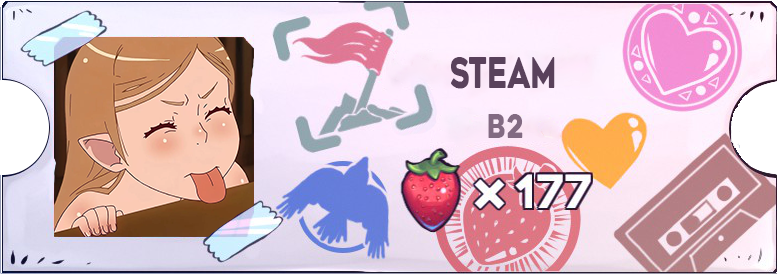
<style>
.page{position:relative;width:778px;height:274px}
.page>*{position:absolute;margin:0}
.t1{font:42px "GeometosSoft-ExtraBold";color:#59415b;scale:0.7 1}
.t2{font:32px "GeometosSoft-ExtraBold";color:#826a82;scale:0.86 1}
</style>
<div class="page">
<p class="t1" style="left:451px;top:57px;width:104px;height:32px">Steam</p>
<p class="t2" style="left:488px;top:114px;width:35px;height:24px">B2</p>
</div>
